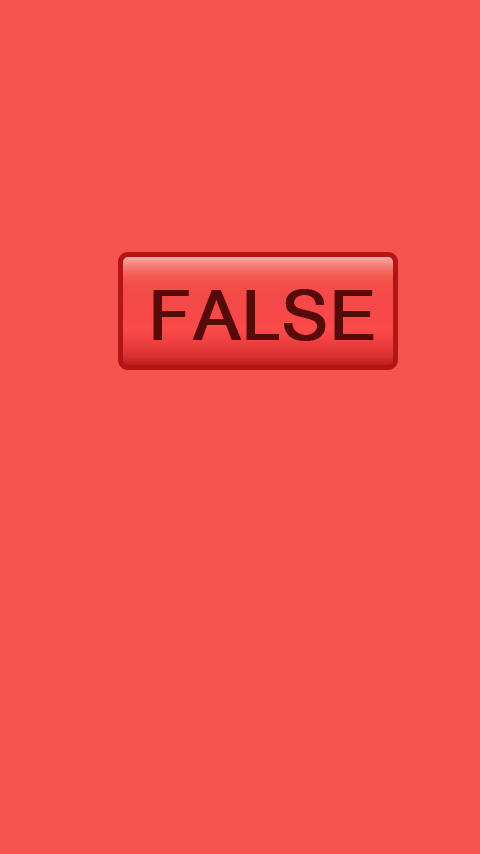
<style>
.page{position:relative;width:480px;height:854px;background:#f3554e}
.page>*{position:absolute;margin:0}
.t1{font:69.4px "MicrosoftSansSerif";color:#560a0a;font-weight:bold}
</style>
<div class="page">
<p class="t1" style="left:153px;top:289px;width:221px;height:52px">FALSE</p>
</div>
